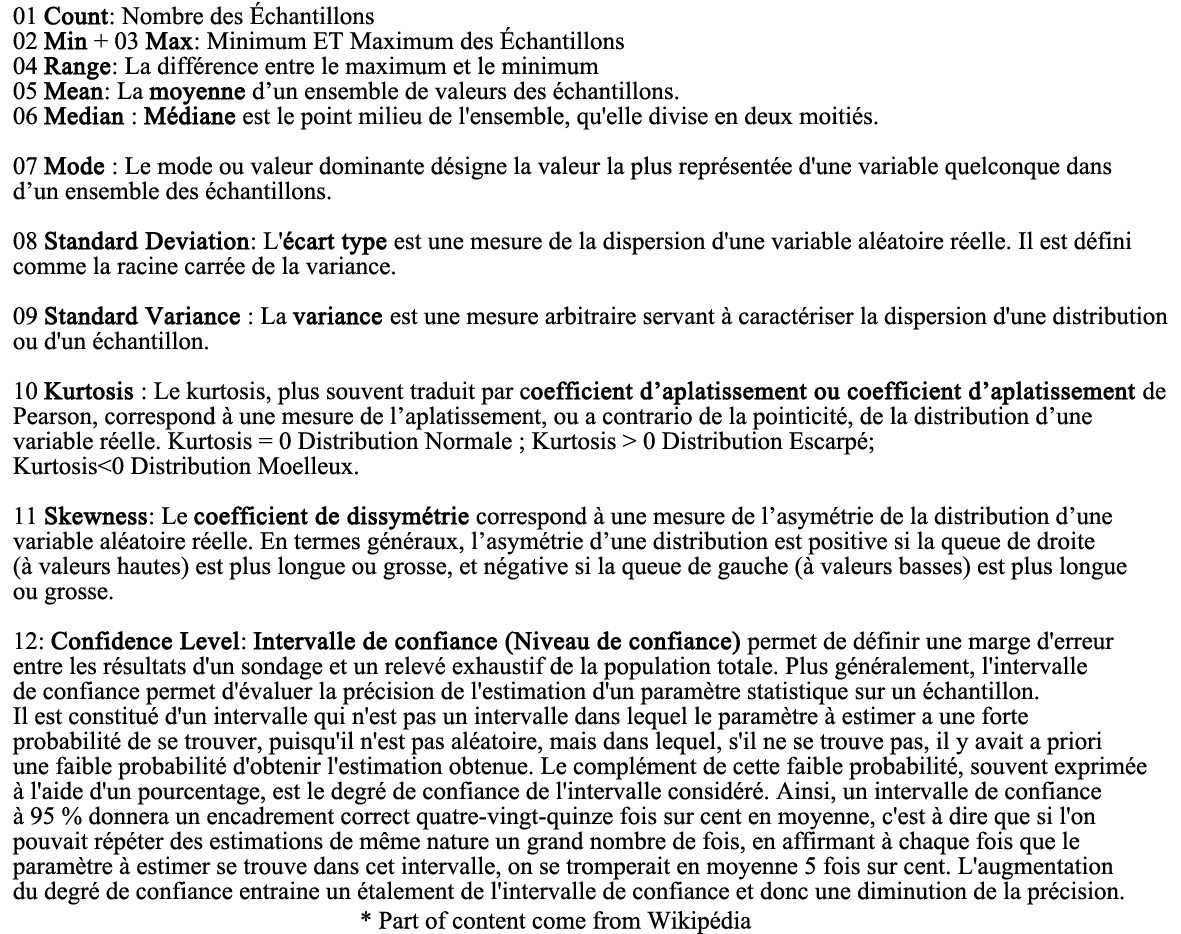
<style>
.page{position:relative;width:1181px;height:934px;background:#ffffff}
.page>*{position:absolute;margin:0}
.t1{font:25px/25px "TimesNewRomanPSMT";color:#000000}
.t2{font:25px/25px "TimesNewRomanPSMT";color:#000000;font-weight:bold}
.t3{font:25px "TimesNewRomanPSMT";color:#000000}
</style>
<div class="page">
<p class="t1" style="left:12px;top:2px;width:1156px;height:903px">01 <span class="t2">Count</span>: Nombre des Échantillons <br>02 <span class="t2">Min</span> + 03 <span class="t2">Max</span>: Minimum ET Maximum des Échantillons <br>04 <span class="t2">Range</span>: La différence entre le maximum et le minimum <br>05 <span class="t2">Mean</span>: La <span class="t2">moyenne</span> d’un ensemble de valeurs des échantillons.<br>06 <span class="t2">Median</span> : <span class="t2">Médiane</span> est le point milieu de l'ensemble, qu'elle divise en deux moitiés.<br><br>07 <span class="t2">Mode</span> : Le mode ou valeur dominante désigne la valeur la plus représentée d'une variable quelconque dans <br>d’un ensemble des échantillons.<br><br>08 <span class="t2">Standard Deviation</span>: L'<span class="t2">écart type</span> est une mesure de la dispersion d'une variable aléatoire réelle. Il est défini <br>comme la racine carrée de la variance.  <br><br>09 <span class="t2">Standard Variance</span> : La <span class="t2">variance </span>est une mesure arbitraire servant à caractériser la dispersion d'une distribution <br>ou d'un échantillon.<br> <br>10 <span class="t2">Kurtosis</span> : Le kurtosis, plus souvent traduit par c<span class="t2">oefficient d’aplatissement ou coefficient d’aplatissement </span>de <br>Pearson, correspond à une mesure de l’aplatissement, ou a contrario de la pointicité, de la distribution d’une <br>variable réelle. Kurtosis = 0 Distribution Normale ; Kurtosis &gt; 0 Distribution Escarpé; <br>Kurtosis&lt;0 Distribution Moelleux.<br><br>11 <span class="t2">Skewness</span>: Le <span class="t2">coefficient de dissymétrie</span> correspond à une mesure de l’asymétrie de la distribution d’une <br>variable aléatoire réelle. En termes généraux, l’asymétrie d’une distribution est positive si la queue de droite <br>(à valeurs hautes) est plus longue ou grosse, et négative si la queue de gauche (à valeurs basses) est plus longue <br>ou grosse.<br><br>12: <span class="t2">Confidence Level</span>: <span class="t2">Intervalle de confiance (Niveau de confiance)</span> permet de définir une marge d'erreur <br>entre les résultats d'un sondage et un relevé exhaustif de la population totale. Plus généralement, l'intervalle <br>de confiance permet d'évaluer la précision de l'estimation d'un paramètre statistique sur un échantillon. <br>Il est constitué d'un intervalle qui n'est pas un intervalle dans lequel le paramètre à estimer a une forte <br>probabilité de se trouver, puisqu'il n'est pas aléatoire, mais dans lequel, s'il ne se trouve pas, il y avait a priori <br>une faible probabilité d'obtenir l'estimation obtenue. Le complément de cette faible probabilité, souvent exprimée <br>à l'aide d'un pourcentage, est le degré de confiance de l'intervalle considéré. Ainsi, un intervalle de confiance <br>à 95 % donnera un encadrement correct quatre-vingt-quinze fois sur cent en moyenne, c'est à dire que si l'on <br>pouvait répéter des estimations de même nature un grand nombre de fois, en affirmant à chaque fois que le <br>paramètre à estimer se trouve dans cet intervalle, on se tromperait en moyenne 5 fois sur cent. L'augmentation <br>du degré de confiance entraine un étalement de l'intervalle de confiance et donc une diminution de la précision.</p>
<p class="t3" style="left:361px;top:911px;width:391px;height:23px">* Part of content come from Wikipédia</p>
</div>
